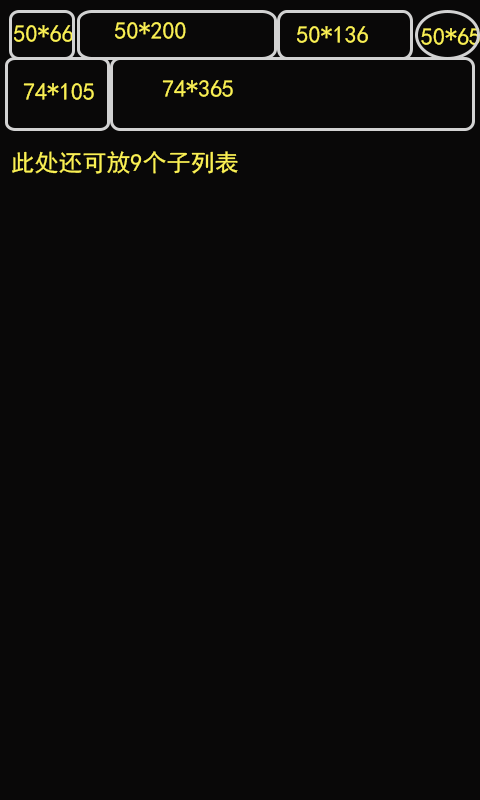
<style>
.page{position:relative;width:480px;height:800px;background:#090808}
.page>*{position:absolute;margin:0}
.t1{font:24px "SimHei";color:#faf054}
</style>
<div class="page">
<p class="t1" style="left:14px;top:25px;width:59px;height:17px">50*66</p>
<p class="t1" style="left:115px;top:22px;width:71px;height:17px">50*200</p>
<p class="t1" style="left:297px;top:26px;width:71px;height:17px">50*136</p>
<p class="t1" style="left:421px;top:28px;width:59px;height:17px">50*65</p>
<p class="t1" style="left:23px;top:83px;width:71px;height:17px">74*105</p>
<p class="t1" style="left:162px;top:80px;width:71px;height:17px">74*365</p>
<p class="t1" style="left:12px;top:151px;width:226px;height:23px">此处还可放9个子列表</p>
</div>
